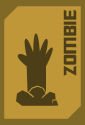
<style>
.page{position:relative;width:85px;height:125px;background:#bf9739}
.page>*{position:absolute;margin:0}
.t1{font:20px "TransformersMovie";letter-spacing:0.04em;color:#4c3f17}
</style>
<div class="page">
<p class="t1" style="left:63px;top:9px;width:14px;height:67px;rotate:-90deg">zombie</p>
</div>
